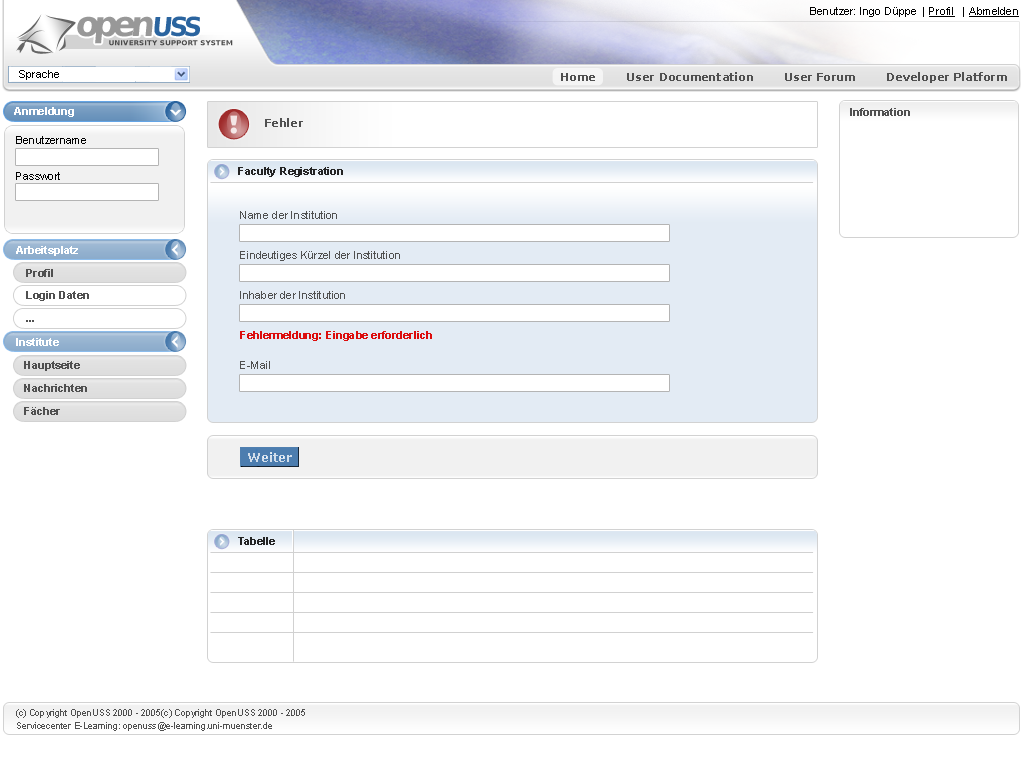
<style>
.page{position:relative;width:1024px;height:768px;background:#ffffff}
.page>*{position:absolute;margin:0}
.t1{font:34.7px "BitstreamVeraSans-Bold";letter-spacing:-0.15em;color:#989898}
.t2{font:34.7px "BitstreamVeraSans-Bold";letter-spacing:-0.08em;color:#989898}
.t3{font:26px "BitstreamVeraSans-Bold";letter-spacing:-0.14em;color:#2a649f}
.t4{font:26px "BitstreamVeraSans-Bold";letter-spacing:-0.12em;color:#2a649f}
.t5{font:11px "ArialMT";color:#000000}
.t6{font:11px "ArialMT";color:#000000;text-decoration:underline}
.t7{font:7px "BitstreamVeraSans-Bold";letter-spacing:0.025em;color:#4a4a4a}
.t8{font:11px "BitstreamVeraSans-Bold";color:#505050}
.t9{font:11px "Arial-BoldMT";color:#ffffff}
.t10{font:11px "Arial-BoldMT";color:#505050}
.t11{font:11px/36px "ArialMT";color:#000000}
.t12{font:11px "Arial-BoldMT";color:#242424}
.t13{font:11px/40px "ArialMT";color:#505050}
.t14{font:11px/40px "Arial-BoldMT";color:#dc0d0d}
.t15{font:11px/30px "ArialMT";color:#505050}
.t16{font:11px/23px "Arial-BoldMT";color:#505050}
.t17{font:9px/13px "ArialMT";color:#505050}
</style>
<div class="page">
<p class="t1" style="left:77px;top:16px;width:123px;height:28px">ope<span class="t2">n</span><span class="t3">U</span><span class="t4">SS</span></p>
<p class="t5" style="left:810px;top:7px;width:209px;height:10px">Benutzer: Ingo Düppe  | <span class="t6">Profil</span>   | <span class="t6">Abmelden</span></p>
<p class="t7" style="left:109px;top:40px;width:124px;height:6px">UNIVERSITY SUPPORT SYSTEM</p>
<p class="t5" style="left:19px;top:70px;width:40px;height:10px">Sprache</p>
<p class="t8" style="left:561px;top:72px;width:446px;height:11px">Home        User Documentation        User Forum        Developer Platform</p>
<p class="t9" style="left:14px;top:107px;width:60px;height:10px">Anmeldung</p>
<p class="t10" style="left:850px;top:108px;width:60px;height:8px">Information</p>
<p class="t8" style="left:265px;top:118px;width:38px;height:9px">Fehler</p>
<p class="t11" style="left:16px;top:136px;width:70px;height:44px">Benutzername<br>Passwort</p>
<p class="t12" style="left:238px;top:167px;width:105px;height:10px">Faculty Registration</p>
<p class="t13" style="left:240px;top:211px;width:192px;height:158px">Name der Institution<br>Eindeutiges Kürzel der Institution<br>Inhaber der Institution<br><span class="t14">Fehlermeldung: Eingabe erforderlich<br></span><span class="t15">E-Mail</span></p>
<p class="t9" style="left:16px;top:246px;width:62px;height:10px">Arbeitsplatz</p>
<p class="t10" style="left:26px;top:269px;width:27px;height:8px">Profil</p>
<p class="t16" style="left:26px;top:291px;width:63px;height:31px">Login Daten<br>...</p>
<p class="t9" style="left:16px;top:338px;width:43px;height:8px">Institute</p>
<p class="t10" style="left:24px;top:361px;width:56px;height:10px">Hauptseite</p>
<p class="t10" style="left:24px;top:384px;width:63px;height:8px">Nachrichten</p>
<p class="t10" style="left:24px;top:407px;width:36px;height:8px">Fächer</p>
<p class="t12" style="left:238px;top:537px;width:37px;height:8px">Tabelle</p>
<p class="t17" style="left:16px;top:709px;width:289px;height:22px">(c) Copyright OpenUSS 2000 - 2005(c) Copyright OpenUSS 2000 - 2005<br>Servicecenter E-Learning: openuss@e-learning.uni-muenster.de</p>
</div>
